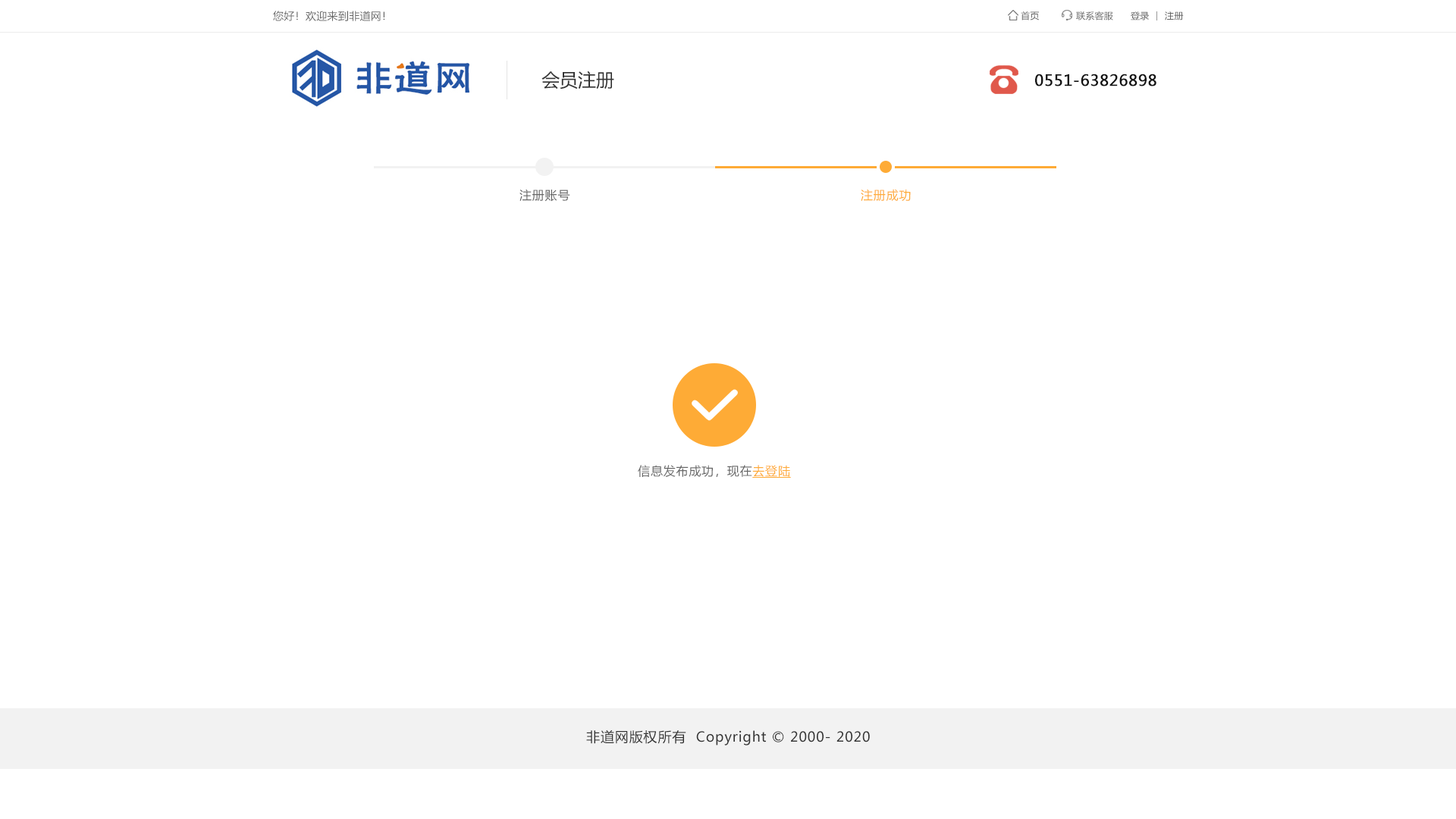
<style>
.page{position:relative;width:1456px;height:819px;background:#ffffff}
.page>*{position:absolute;margin:0}
.t1{font:10.6px "MicrosoftYaHei";letter-spacing:0.022em;color:#666666}
.t2{font:9.1px "MicrosoftYaHei";letter-spacing:0.022em;color:#666666}
.t3{font:18.2px "MicrosoftYaHei";color:#333333}
.t4{font:15.2px "MicrosoftYaHei";letter-spacing:0.022em;color:#121212;font-weight:bold}
.t5{font:12.1px "MicrosoftYaHei";letter-spacing:0.05em;color:#666666}
.t6{font:12.1px "MicrosoftYaHei";letter-spacing:0.05em;color:#feab36}
.t7{font:12.1px "MicrosoftYaHei";letter-spacing:0.05em;color:#feab36;text-decoration:underline}
.t8{font:13.6px "MicrosoftYaHei";letter-spacing:0.05em;color:#333333}
</style>
<div class="page">
<p class="t1" style="left:273px;top:11px;width:112px;height:10px">您好！欢迎来到非道网！</p>
<p class="t2" style="left:1021px;top:11px;width:18px;height:9px">首页</p>
<p class="t2" style="left:1076px;top:11px;width:37px;height:9px">联系客服</p>
<p class="t2" style="left:1131px;top:11px;width:18px;height:9px">登录</p>
<p class="t2" style="left:1165px;top:11px;width:19px;height:9px">注册</p>
<p class="t3" style="left:541px;top:71px;width:73px;height:18px">会员注册</p>
<p class="t4" style="left:1035px;top:74px;width:121px;height:12px">0551-63826898</p>
<p class="t5" style="left:519px;top:189px;width:51px;height:13px">注册账号</p>
<p class="t6" style="left:861px;top:189px;width:50px;height:12px">注册成功</p>
<p class="t5" style="left:638px;top:465px;width:153px;height:13px">信息发布成功，现在<span class="t7">去登陆</span></p>
<p class="t8" style="left:586px;top:730px;width:284px;height:15px">非道网版权所有  Copyright © 2000- 2020</p>
</div>
